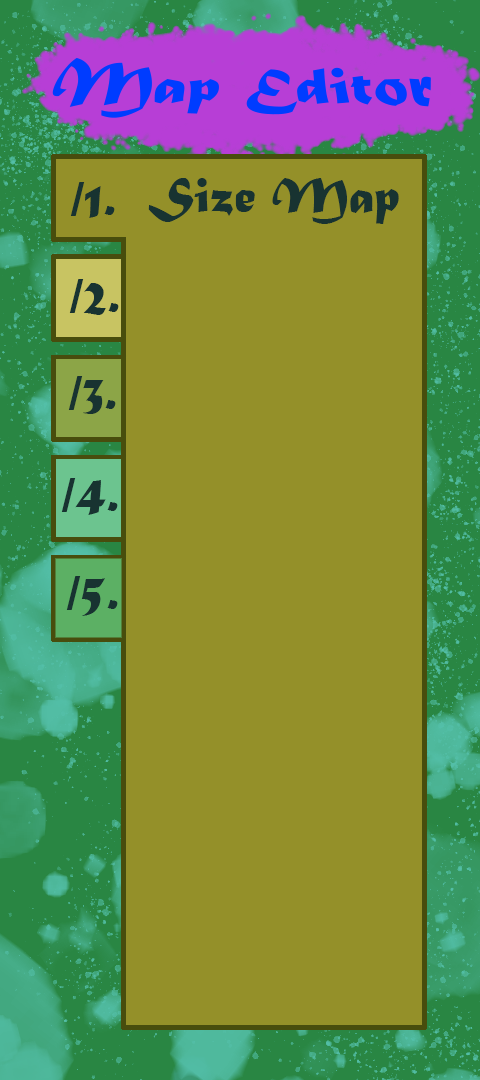
<style>
.page{position:relative;width:480px;height:1080px;background:#949029}
.page>*{position:absolute;margin:0}
.t1{font:52.3px "MaturaMTScriptCapitals";color:#183331}
</style>
<div class="page">
<p class="t1" style="left:70px;top:182px;width:45px;height:36px">/1.</p>
<p class="t1" style="left:148px;top:178px;width:251px;height:46px">Size Map</p>
<p class="t1" style="left:69px;top:279px;width:50px;height:36px">/2.</p>
<p class="t1" style="left:68px;top:376px;width:48px;height:38px">/3.</p>
<p class="t1" style="left:61px;top:478px;width:57px;height:37px">/4.</p>
<p class="t1" style="left:66px;top:576px;width:52px;height:40px">/5.</p>
</div>
